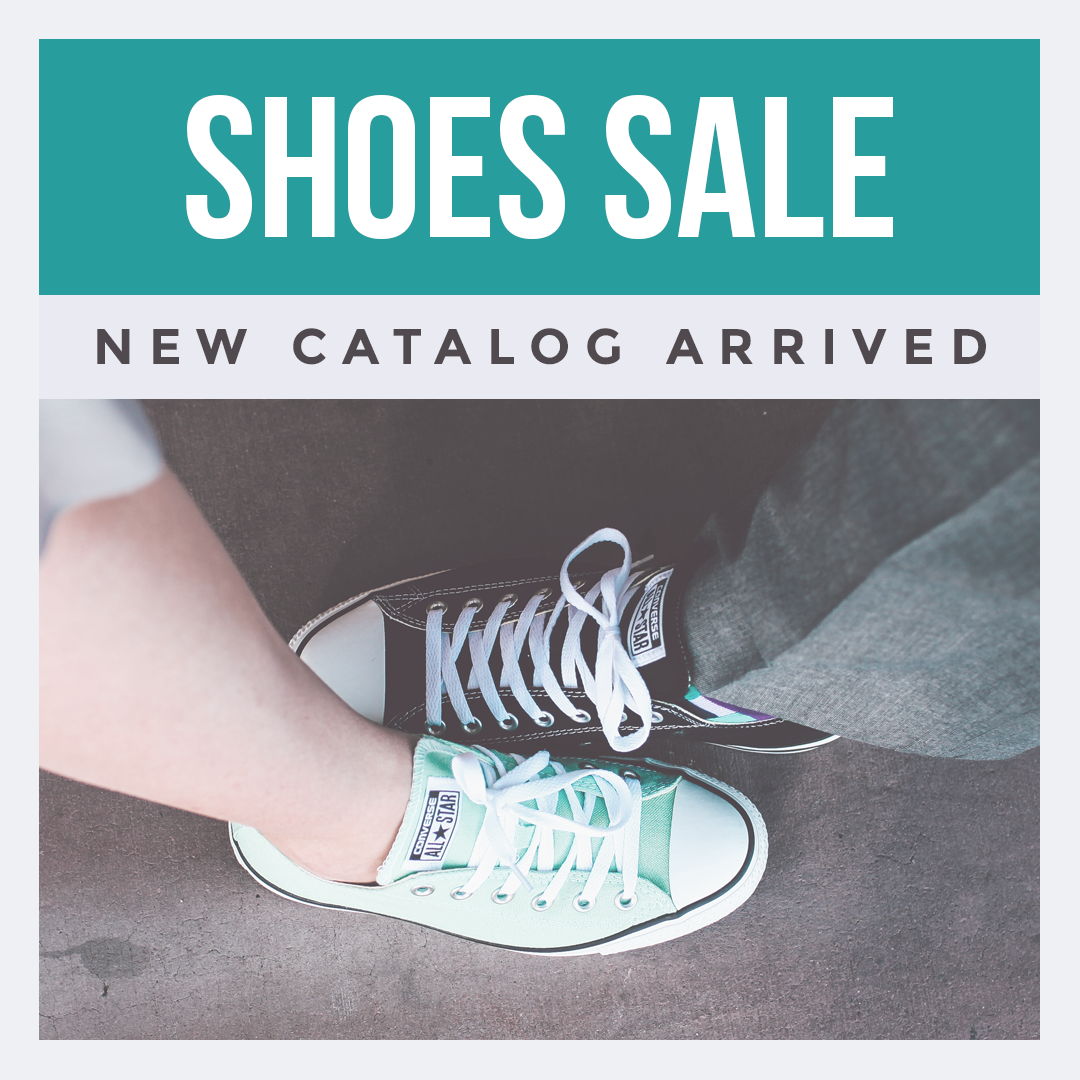
<style>
.page{position:relative;width:1080px;height:1080px}
.page>*{position:absolute;margin:0}
.t1{font:200px "BebasNeueBold";color:#ffffff;text-transform:uppercase}
.t2{font:50px "Montserrat-Bold";letter-spacing:0.3em;color:#504a4e;text-transform:uppercase}
</style>
<div class="page">
<p class="t1" style="left:186px;top:95px;width:707px;height:144px">shoes sale</p>
<p class="t2" style="left:97px;top:328px;width:889px;height:37px">new catalog arrived</p>
</div>
